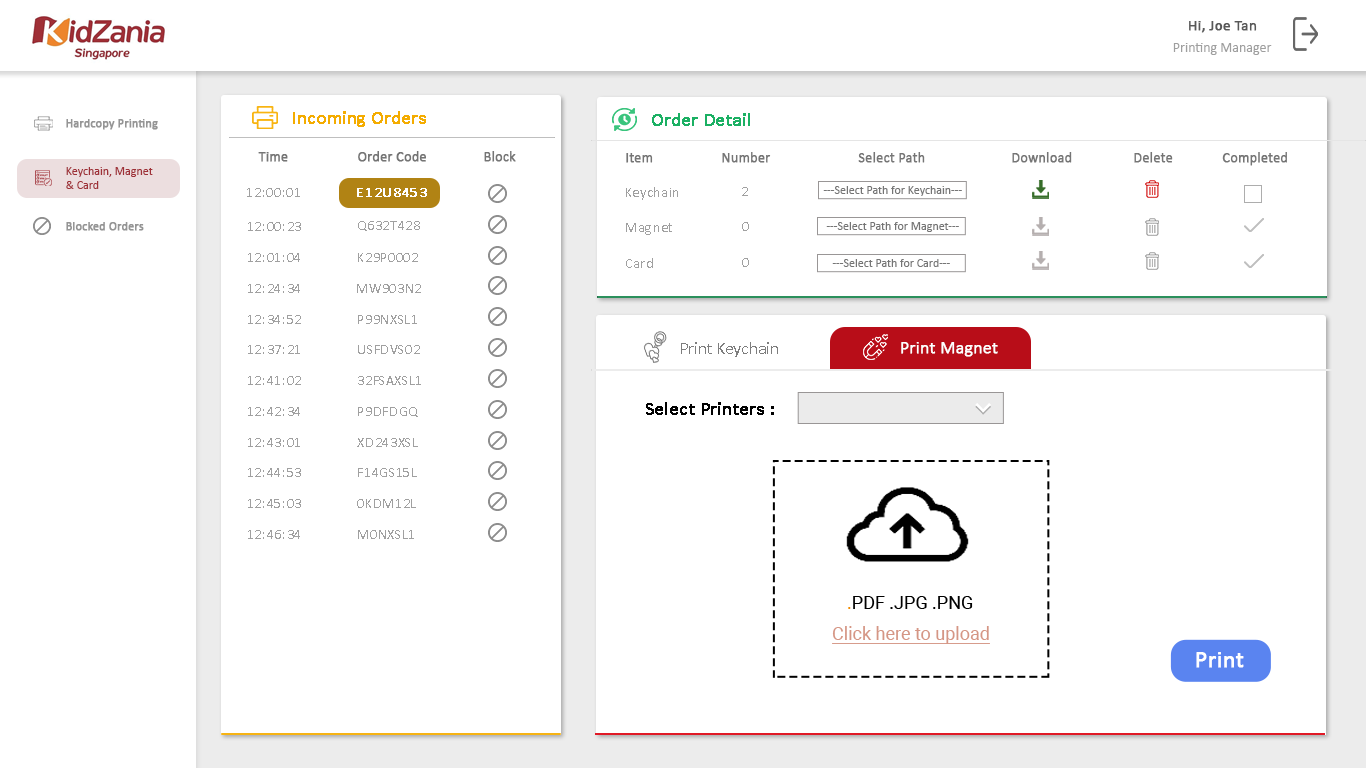
<style>
.page{position:relative;width:1366px;height:768px;background:#ffffff}
.page>*{position:absolute;margin:0}
.t1{font:15px "Calibri";color:#585858;font-weight:bold}
.t2{font:14px "Calibri";color:#9f9f9f}
.t3{font:18px "Calibri";color:#f4ac00;font-weight:bold}
.t4{font:18px "Calibri";color:#1bb063;font-weight:bold}
.t5{font:12px "Calibri";color:#959595;font-weight:bold}
.t6{font:14px "Calibri";color:#757575;font-weight:bold}
.t7{font:12px/14px "Calibri";color:#9f3037}
.t8{font:14px "Calibri";letter-spacing:0.05em;color:#a0a0a0}
.t9{font:14px "Calibri";letter-spacing:0.05em;color:#ffffff;font-weight:bold}
.t10{font:12px "Calibri";color:#757575}
.t11{font:18px "Calibri";letter-spacing:-0.01em;color:#7d7d7d}
.t12{font:18px "Calibri-Light";letter-spacing:-0.01em;color:#ffffff;font-weight:bold}
.t13{font:18px "Calibri";color:#010101;font-weight:bold}
.t14{font:18px "Roboto-Regular";color:#010101}
.t15{font:18px "Roboto-Regular";color:#f28b00}
.t16{font:18px "Roboto-Regular";color:#d59685;text-decoration:underline}
.t17{font:24px "Calibri";color:#ffffff;font-weight:bold}
</style>
<div class="page">
<p class="t1" style="left:1189px;top:21px;width:68px;height:12px">Hi, Joe Tan</p>
<p class="t2" style="left:1173px;top:43px;width:99px;height:12px">Printing Manager</p>
<p class="t3" style="left:293px;top:111px;width:133px;height:16px">Incoming Orders</p>
<p class="t4" style="left:652px;top:113px;width:98px;height:13px">Order Detail</p>
<p class="t5" style="left:66px;top:119px;width:92px;height:11px">Hardcopy Printing</p>
<p class="t6" style="left:258px;top:152px;width:30px;height:10px">Time</p>
<p class="t6" style="left:358px;top:151px;width:68px;height:11px">Order Code</p>
<p class="t6" style="left:484px;top:151px;width:32px;height:11px">Block</p>
<p class="t6" style="left:626px;top:153px;width:27px;height:10px">Item</p>
<p class="t6" style="left:722px;top:152px;width:49px;height:11px">Number</p>
<p class="t6" style="left:858px;top:152px;width:67px;height:11px">Select Path</p>
<p class="t6" style="left:1012px;top:152px;width:60px;height:11px">Download</p>
<p class="t6" style="left:1134px;top:152px;width:39px;height:11px">Delete</p>
<p class="t6" style="left:1222px;top:152px;width:65px;height:14px">Completed</p>
<p class="t7" style="left:66px;top:167px;width:87px;height:22px">Keychain, Magnet<br>&amp; Card</p>
<p class="t8" style="left:247px;top:188px;width:53px;height:9px">12:00:01</p>
<p class="t9" style="left:357px;top:188px;width:70px;height:9px">E12U8453</p>
<p class="t8" style="left:626px;top:187px;width:52px;height:13px">Keychain</p>
<p class="t8" style="left:742px;top:187px;width:6px;height:9px">2</p>
<p class="t10" style="left:823px;top:186px;width:139px;height:10px">---Select Path for Keychain---</p>
<p class="t5" style="left:66px;top:222px;width:78px;height:9px">Blocked Orders</p>
<p class="t8" style="left:248px;top:222px;width:53px;height:9px">12:00:23</p>
<p class="t8" style="left:358px;top:221px;width:62px;height:10px">Q632T428</p>
<p class="t8" style="left:742px;top:222px;width:7px;height:9px">0</p>
<p class="t10" style="left:826px;top:222px;width:133px;height:10px">---Select Path for Magnet---</p>
<p class="t8" style="left:626px;top:223px;width:46px;height:12px">Magnet</p>
<p class="t8" style="left:248px;top:253px;width:52px;height:9px">12:01:04</p>
<p class="t8" style="left:358px;top:253px;width:60px;height:9px">K29P0002</p>
<p class="t8" style="left:626px;top:258px;width:27px;height:10px">Card</p>
<p class="t8" style="left:742px;top:258px;width:7px;height:9px">0</p>
<p class="t10" style="left:832px;top:259px;width:118px;height:8px">---Select Path for Card---</p>
<p class="t8" style="left:248px;top:284px;width:52px;height:9px">12:24:34</p>
<p class="t8" style="left:357px;top:284px;width:64px;height:9px">MW903N2</p>
<p class="t8" style="left:248px;top:315px;width:53px;height:9px">12:34:52</p>
<p class="t8" style="left:358px;top:315px;width:59px;height:9px">P99NXSL1</p>
<p class="t11" style="left:681px;top:342px;width:97px;height:15px">Print Keychain</p>
<p class="t12" style="left:901px;top:342px;width:97px;height:15px">Print Magnet</p>
<p class="t8" style="left:248px;top:345px;width:52px;height:9px">12:37:21</p>
<p class="t8" style="left:358px;top:345px;width:62px;height:9px">USFDVS02</p>
<p class="t8" style="left:248px;top:376px;width:53px;height:9px">12:41:02</p>
<p class="t8" style="left:358px;top:376px;width:63px;height:9px">32FSAXSL1</p>
<p class="t8" style="left:248px;top:407px;width:52px;height:9px">12:42:34</p>
<p class="t8" style="left:358px;top:407px;width:60px;height:10px">P9DFDGQ</p>
<p class="t13" style="left:646px;top:402px;width:128px;height:13px">Select Printers :</p>
<p class="t8" style="left:248px;top:438px;width:52px;height:9px">12:43:01</p>
<p class="t8" style="left:357px;top:438px;width:61px;height:9px">XD243XSL</p>
<p class="t8" style="left:248px;top:468px;width:53px;height:9px">12:44:53</p>
<p class="t8" style="left:358px;top:468px;width:59px;height:9px">F14GS15L</p>
<p class="t8" style="left:248px;top:499px;width:53px;height:9px">12:45:03</p>
<p class="t8" style="left:357px;top:499px;width:59px;height:9px">0KDM12L</p>
<p class="t8" style="left:248px;top:530px;width:52px;height:9px">12:46:34</p>
<p class="t8" style="left:358px;top:530px;width:56px;height:9px">M0NXSL1</p>
<p class="t14" style="left:848px;top:596px;width:125px;height:13px"><span class="t15">.</span>PDF .JPG .PNG</p>
<p class="t16" style="left:832px;top:626px;width:158px;height:18px">Click here to upload</p>
<p class="t17" style="left:1196px;top:652px;width:48px;height:16px">Print</p>
</div>
